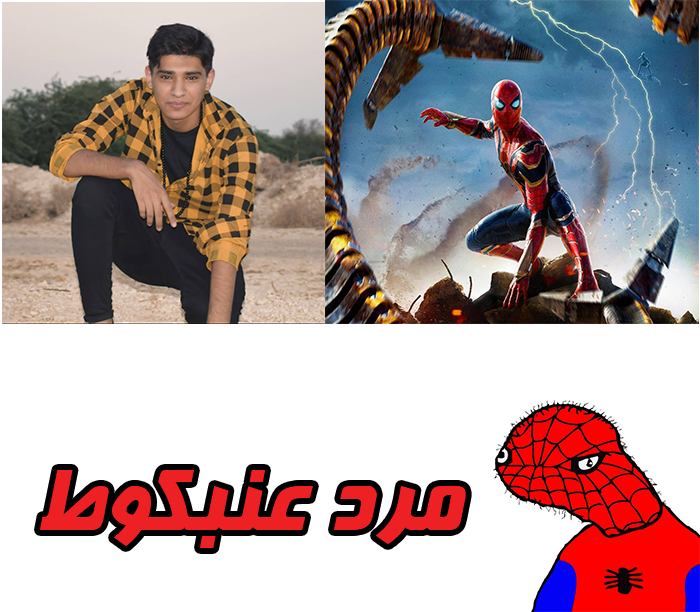
<style>
.page{position:relative;width:700px;height:612px;background:#ffffff}
.page>*{position:absolute;margin:0}
.t1{font:104.2px "Far.Farnaz";color:#ed2024}
</style>
<div class="page">
<p class="t1" style="left:40px;top:470px;width:426px;height:78px">مرد عنبکوط</p>
</div>
